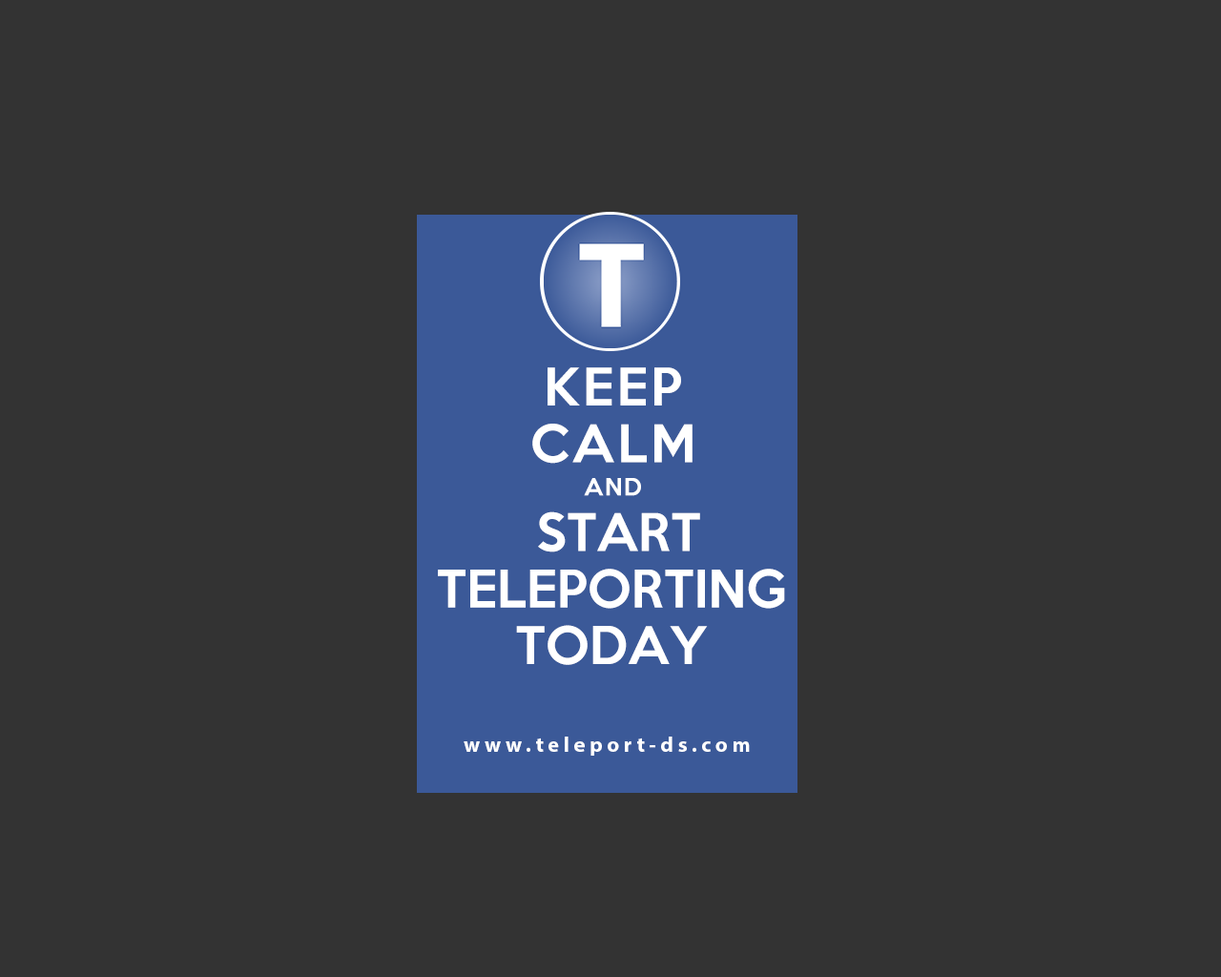
<style>
.page{position:relative;width:1221px;height:977px;background:#333333}
.page>*{position:absolute;margin:0}
.t1{font:47.6px/56.5px "KeepCalm-Medium";letter-spacing:0.07em;color:#ffffff;text-transform:uppercase}
.t2{font:21.7px "KeepCalm-Medium";letter-spacing:0.07em;color:#ffffff;text-transform:uppercase}
.t3{font:47.6px/56.5px "KeepCalm-Medium";color:#ffffff;text-transform:uppercase}
.t4{font:21.7px "MyriadPro-Bold";letter-spacing:0.2em;color:#ffffff}
</style>
<div class="page">
<p class="t1" style="left:532px;top:367px;width:160px;height:97px;text-align:center">Keep <br>Calm</p>
<p class="t2" style="left:584px;top:478px;width:57px;height:18px">and</p>
<p class="t3" style="left:438px;top:511px;width:347px;height:154px;text-align:center">START<br>TELEPORTING<br>TODAY</p>
<p class="t4" style="left:464px;top:736px;width:286px;height:19px">www.teleport-ds.com</p>
</div>
